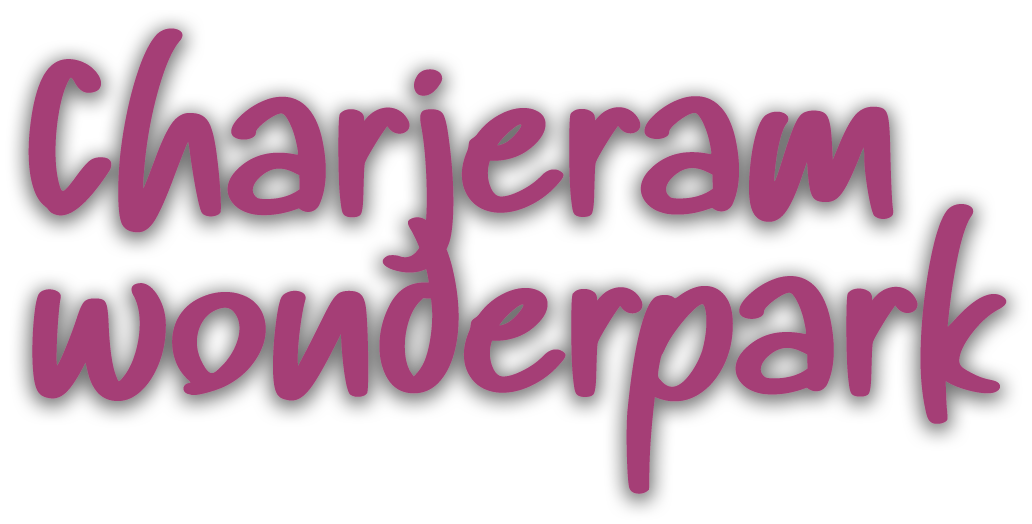
<style>
.page{position:relative;width:1032px;height:524px;background:#ffffff}
.page>*{position:absolute;margin:0}
.t1{font:150px "HumbleLettering";color:#a53e76}
</style>
<div class="page">
<p class="t1" style="left:28px;top:28px;width:979px;height:466px;text-align:justify">Charjeram <br>wonderpark</p>
</div>
